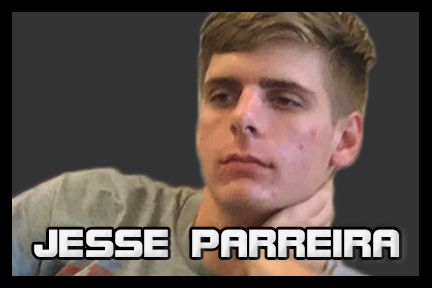
<style>
.page{position:relative;width:432px;height:288px;background:#333333}
.page>*{position:absolute;margin:0}
.t1{font:41.7px "BolsterBold";color:#f3f3f3}
</style>
<div class="page">
<p class="t1" style="left:34px;top:229px;width:365px;height:28px">JESSE PARREIRA</p>
</div>
